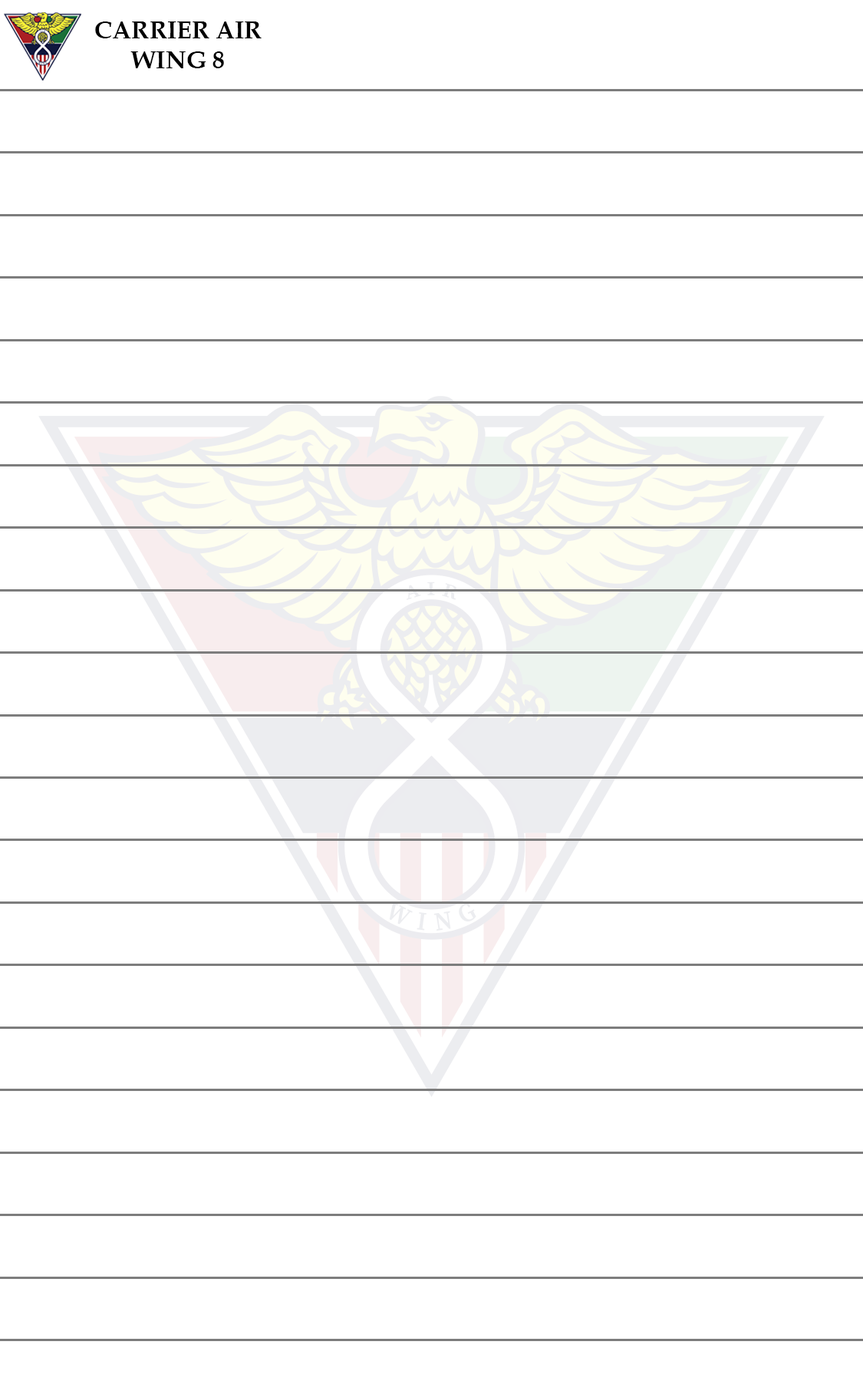
<style>
.page{position:relative;width:863px;height:1381px;background:#ffffff}
.page>*{position:absolute;margin:0}
.t1{font:24.6px "BookAntiqua-Bold";color:#000000}
</style>
<div class="page">
<p class="t1" style="left:95px;top:21px;width:167px;height:47px;text-align:center">CARRIER AIR<br>WING 8</p>
</div>
